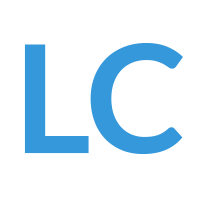
<style>
.page{position:relative;width:200px;height:200px;background:#ffffff}
.page>*{position:absolute;margin:0}
.t1{font:150px "Lato-Bold";color:#3498db}
</style>
<div class="page">
<p class="t1" style="left:24px;top:43px;width:159px;height:111px">LC</p>
</div>
